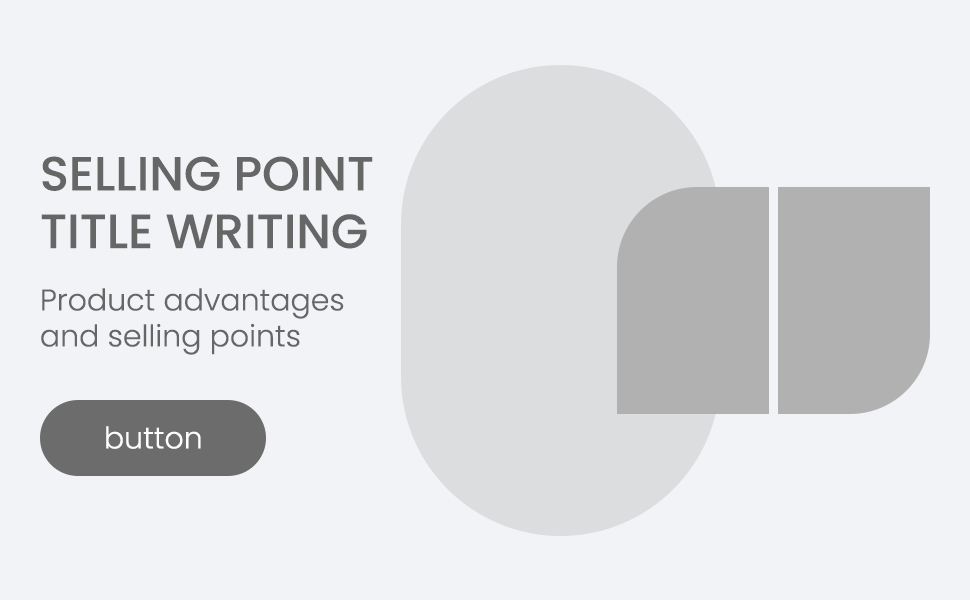
<style>
.page{position:relative;width:970px;height:600px;background:#f2f3f6}
.page>*{position:absolute;margin:0}
.t1{font:48px "Poppins-Medium";color:#666666;text-transform:uppercase}
.t2{font:30px "Poppins-Light";color:#666666}
.t3{font:30px "Poppins-Light";color:#fefefe}
</style>
<div class="page">
<p class="t1" style="left:41px;top:156px;width:332px;height:93px">Selling point<br>title writing</p>
<p class="t2" style="left:41px;top:288px;width:303px;height:67px">Product advantages<br>and selling points</p>
<p class="t3" style="left:106px;top:426px;width:95px;height:23px">button</p>
</div>
